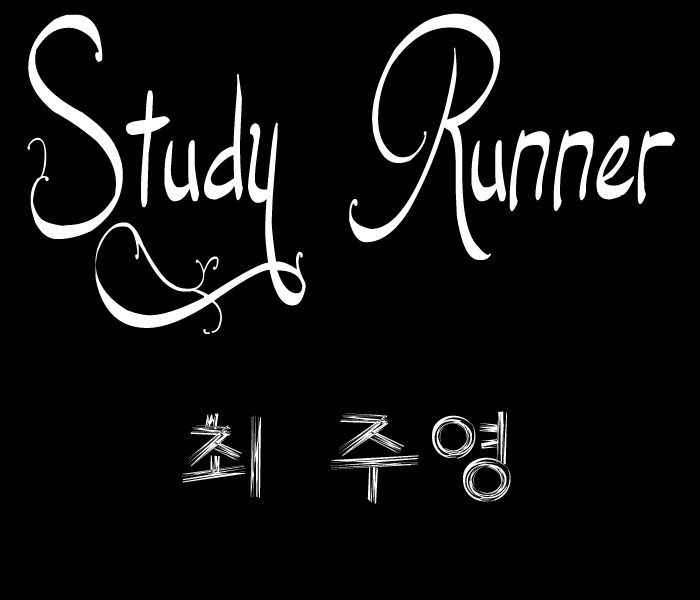
<style>
.page{position:relative;width:700px;height:600px;background:#000000}
.page>*{position:absolute;margin:0}
.t1{font:350px "Jellyka,-End_less-Voyage";color:#ffffff;scale:0.7 1}
.t2{font:100px "Mgonsm";color:#ffffff}
</style>
<div class="page">
<p class="t1" style="left:27px;top:13px;width:648px;height:321px">Study Runner</p>
<p class="t2" style="left:182px;top:410px;width:329px;height:94px">최 주영</p>
</div>
